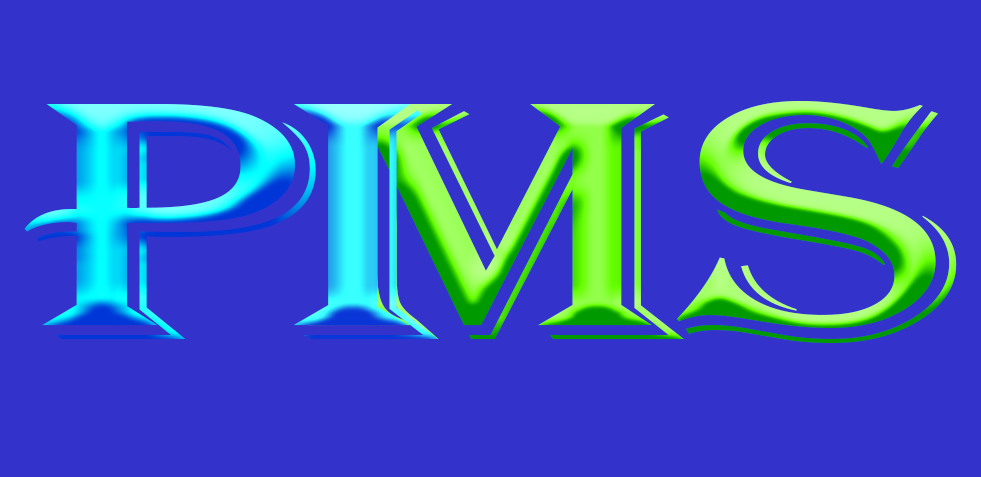
<style>
.page{position:relative;width:981px;height:477px;background:#3333cc}
.page>*{position:absolute;margin:0}
.t1{font:351.6px "Algerian";scale:1.43 1}
</style>
<div class="page">
<p class="t1" style="left:677px;top:101px;width:280px;height:242px">S</p>
<p class="t1" style="left:24px;top:104px;width:292px;height:235px">P</p>
<p class="t1" style="left:294px;top:104px;width:144px;height:235px">I</p>
<p class="t1" style="left:305px;top:104px;width:379px;height:235px">M</p>
</div>
